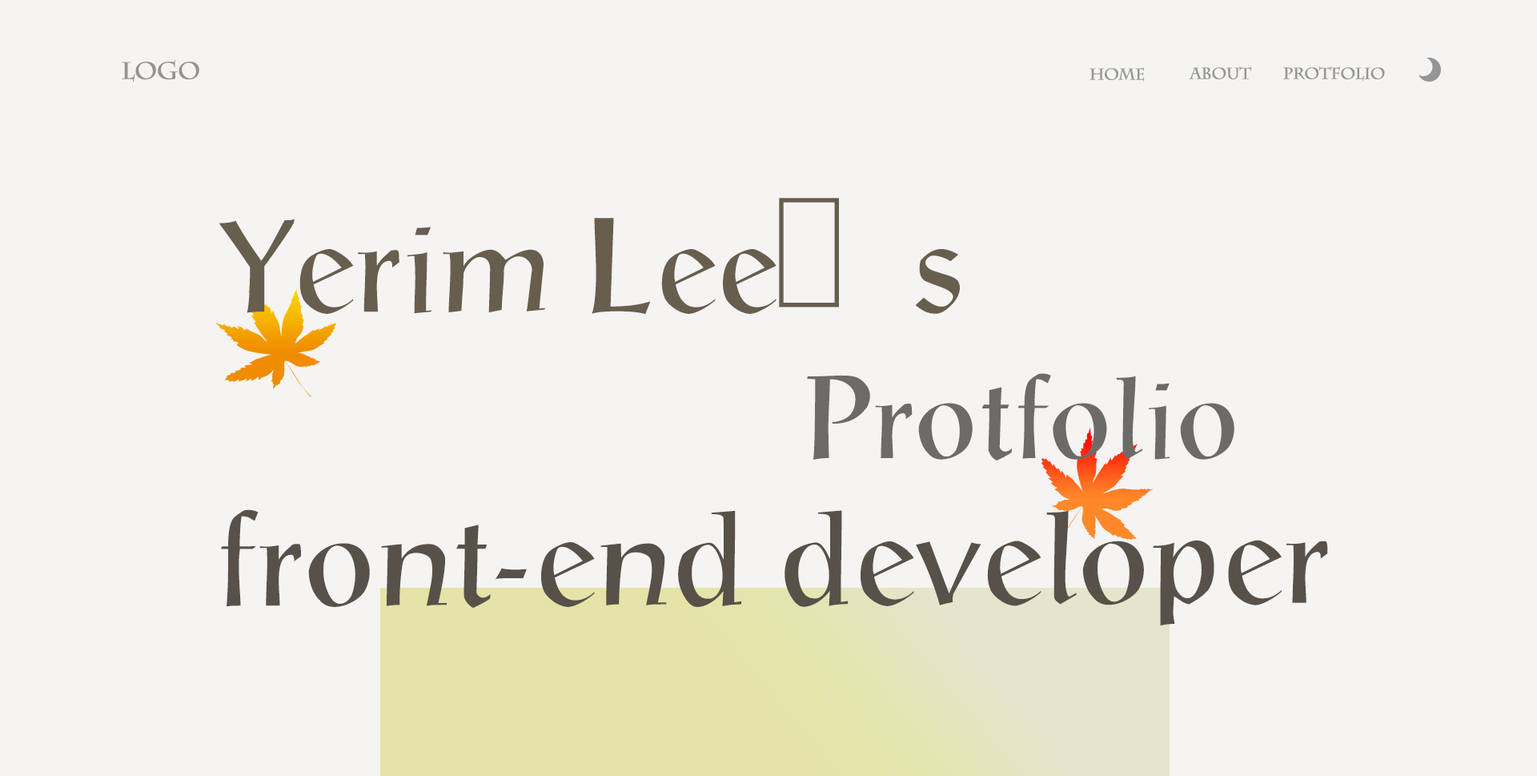
<style>
.page{position:relative;width:1537px;height:776px;background:#f5f4f2}
.page>*{position:absolute;margin:0}
.t1{font:24px "CharlemagneStd-Bold";letter-spacing:-0.025em;color:#949391}
.t2{font:16px "CharlemagneStd-Bold";letter-spacing:-0.025em;color:#979797}
.t3{font:136.1px "TSTNamr";letter-spacing:-0.025em;color:#685e4e}
.t4{font:120.1px "TSTNamr";letter-spacing:-0.025em;color:#6d6b67}
.t5{font:136.1px "TSTNamr";letter-spacing:-0.025em;color:#575149}
</style>
<div class="page">
<p class="t1" style="left:122px;top:59px;width:77px;height:23px">LOGO</p>
<p class="t2" style="left:1283px;top:66px;width:102px;height:16px">PROTFOLIO</p>
<p class="t2" style="left:1090px;top:67px;width:55px;height:15px">home</p>
<p class="t2" style="left:1189px;top:66px;width:63px;height:13px">about</p>
<p class="t3" style="left:219px;top:198px;width:741px;height:117px">Yerim Lee’s</p>
<p class="t4" style="left:807px;top:373px;width:427px;height:87px">Protfolio</p>
<p class="t5" style="left:221px;top:509px;width:1107px;height:116px">front-end developer</p>
</div>
